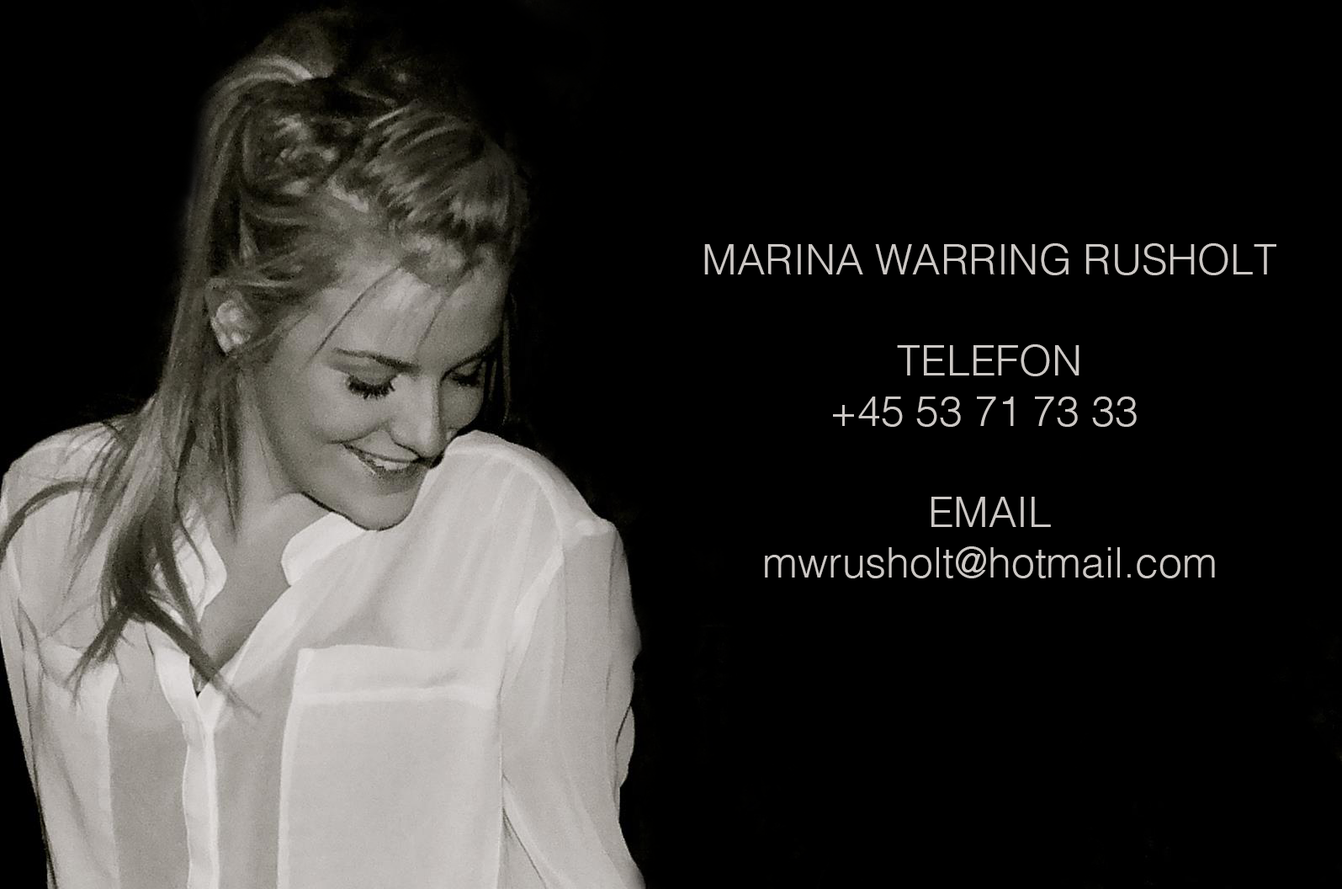
<style>
.page{position:relative;width:1342px;height:889px;background:#000000}
.page>*{position:absolute;margin:0}
.t1{font:42.1px "Helvetica-Light";color:#ccc8c5}
</style>
<div class="page">
<p class="t1" style="left:704px;top:243px;width:572px;height:335px;text-align:center">MARINA WARRING RUSHOLT<br><br>TELEFON<br>+45 53 71 73 33 <br><br>EMAIL<br>mwrusholt@hotmail.com</p>
</div>
